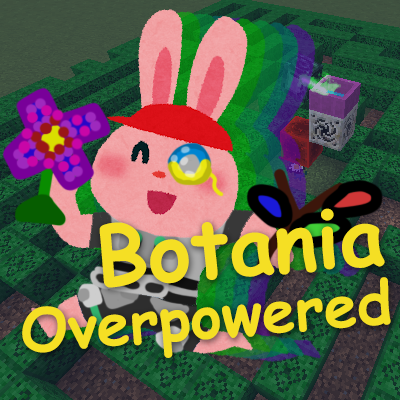
<style>
.page{position:relative;width:400px;height:400px}
.page>*{position:absolute;margin:0}
.t1{font:81.5px "ComicSansMS-Bold";color:#f5df24}
.t2{font:59.6px "ComicSansMS-Bold";color:#f5df24}
</style>
<div class="page">
<p class="t1" style="left:99px;top:208px;width:286px;height:80px;rotate:-5deg">Botania</p>
<p class="t2" style="left:22px;top:277px;width:369px;height:81px;rotate:-5deg">Overpowered</p>
</div>
